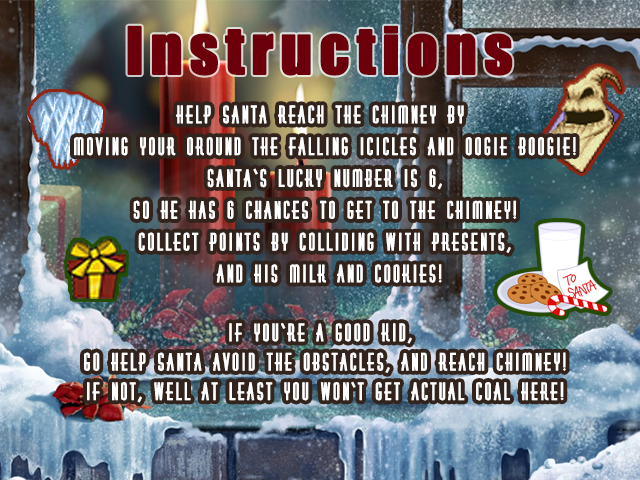
<style>
.page{position:relative;width:640px;height:480px}
.page>*{position:absolute;margin:0}
.t1{font:60px "Impact";letter-spacing:0.1em;color:#6c000a;font-weight:bold}
.t2{font:23px/30px "HuxleyTitling";letter-spacing:0.1em;color:#ffffff;font-weight:bold}
.t3{font:23px "HuxleyTitling";letter-spacing:0.1em;color:#ffffff;font-weight:bold}
</style>
<div class="page">
<p class="t1" style="left:127px;top:25px;width:386px;height:51px">Instructions</p>
<p class="t2" style="left:74px;top:105px;width:502px;height:298px;text-align:center">Help Santa reach the chimney by <br>moving your oround the falling icicles and Oogie Boogie!<br>Santa‘s lucky number is 6,<br>so he has 6 chances to get to the chimney!<br>Collect points by colliding with presents,<br> and his milk and cookies!<br><span class="t3"><br>If you‘re a good kid, <br>go help Santa avoid the obstacles, and reach chimney!<br>If not, well at least you won‘t get actual coal here!</span></p>
</div>
